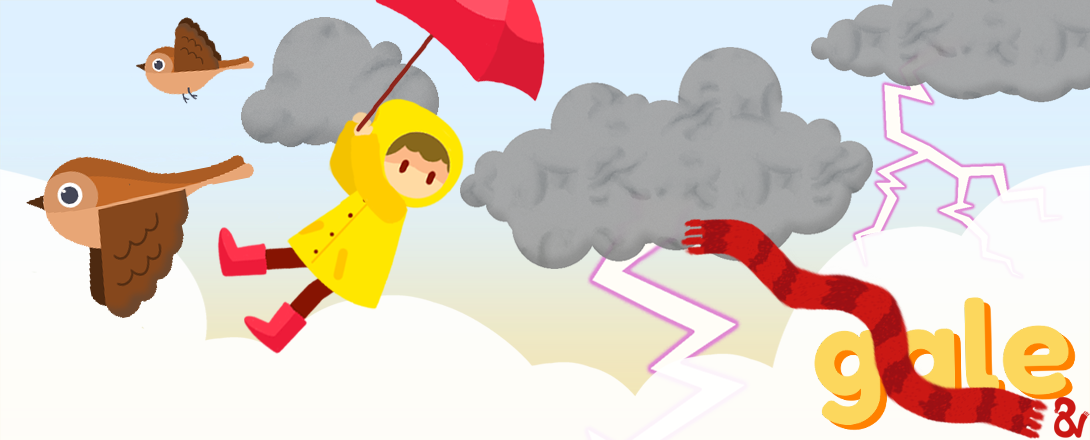
<style>
.page{position:relative;width:1090px;height:440px}
.page>*{position:absolute;margin:0}
.t1{font:133.4px "Fredoka-SemiBold"}
</style>
<div class="page">
<p class="t1" style="left:820px;top:301px;width:256px;height:130px;rotate:-1deg">gale</p>
</div>
